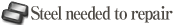
<style>
.page{position:relative;width:193px;height:25px;background:#ffffff}
.page>*{position:absolute;margin:0}
.t1{font:18px "RyuminPro-ExBold";letter-spacing:-0.08em;color:#4c4843;scale:0.9 1}
</style>
<div class="page">
<p class="t1" style="left:31px;top:6px;width:142px;height:17px">Steel needed to repair</p>
</div>
